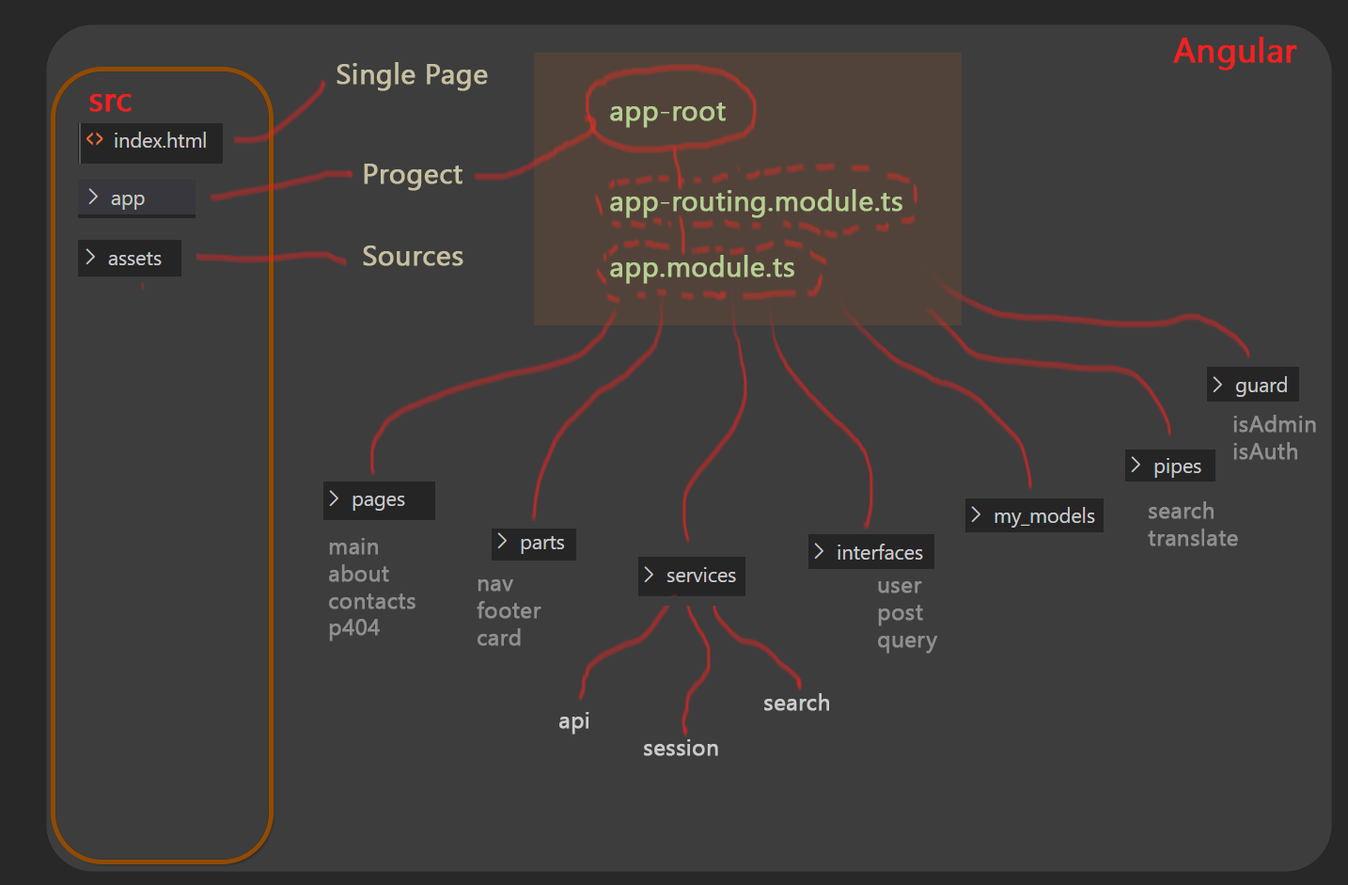
<style>
.page{position:relative;width:1348px;height:885px;background:#3d3d3d}
.page>*{position:absolute;margin:0}
.t1{font:33.8px "SegoeUISymbol";color:#f91f1f;font-weight:bold}
.t2{font:28.2px "SegoeUISymbol";color:#c7c0a1;font-weight:bold}
.t3{font:28.2px "SegoeUISymbol";color:#afdca1;font-weight:bold}
.t4{font:22.6px "SegoeUISymbol";color:#8f8f8f;font-weight:bold}
.t5{font:22.6px "SegoeUISymbol";color:#cbcbcb;font-weight:bold}
</style>
<div class="page">
<p class="t1" style="left:1173px;top:37px;width:124px;height:34px">Angular</p>
<p class="t2" style="left:337px;top:62px;width:151px;height:29px">Single Page</p>
<p class="t1" style="left:89px;top:94px;width:43px;height:18px">src</p>
<p class="t3" style="left:610px;top:102px;width:116px;height:26px">app-root</p>
<p class="t2" style="left:364px;top:164px;width:99px;height:27px">Progect</p>
<p class="t3" style="left:610px;top:189px;width:292px;height:29px">app-routing.module.ts</p>
<p class="t2" style="left:363px;top:245px;width:100px;height:21px">Sources</p>
<p class="t3" style="left:610px;top:255px;width:184px;height:29px">app.module.ts</p>
<p class="t4" style="left:1233px;top:415px;width:83px;height:45px">isAdmin<br>isAuth</p>
<p class="t4" style="left:1148px;top:501px;width:90px;height:45px">search<br>translate</p>
<p class="t4" style="left:329px;top:538px;width:86px;height:103px">main<br>about<br>contacts<br>p404</p>
<p class="t4" style="left:477px;top:579px;width:64px;height:67px">nav<br>footer<br>card</p>
<p class="t4" style="left:878px;top:581px;width:59px;height:72px">user<br>post<br>query</p>
<p class="t5" style="left:764px;top:693px;width:65px;height:18px">search</p>
<p class="t5" style="left:559px;top:712px;width:30px;height:22px">api</p>
<p class="t5" style="left:644px;top:739px;width:74px;height:17px">session</p>
</div>
